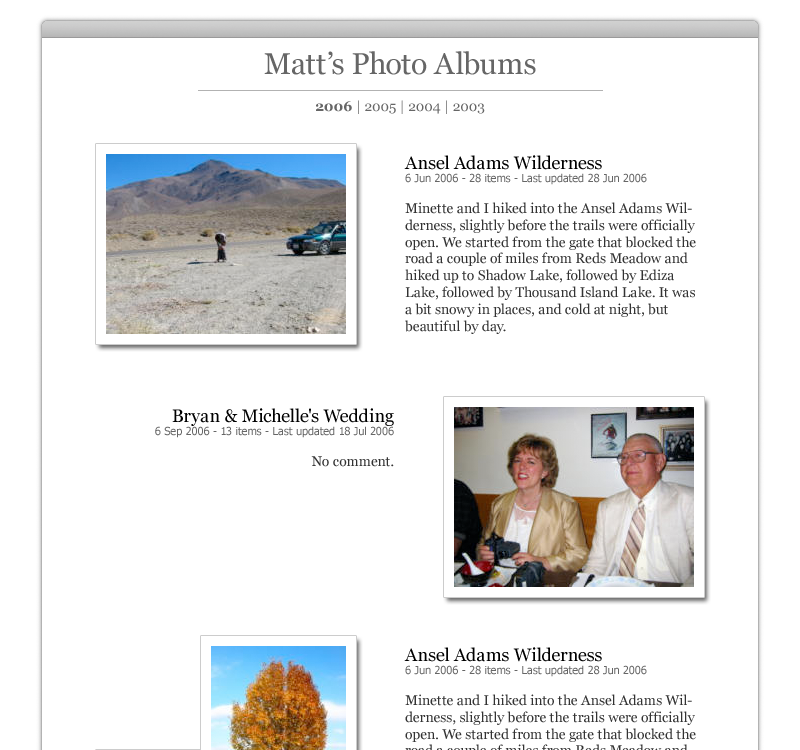
<style>
.page{position:relative;width:800px;height:750px;background:#ffffff}
.page>*{position:absolute;margin:0}
.t1{font:30px "Georgia";color:#666666}
.t2{font:14px "Georgia";color:#666666}
.t3{font:14px "Georgia-Bold";color:#666666}
.t4{font:14px "Georgia";color:#333333}
.t5{font:18px "Georgia";color:#000000}
.t6{font:11px "Tahoma";color:#666666}
</style>
<div class="page">
<p class="t1" style="left:264px;top:51px;width:272px;height:24px">Matt’s Photo Albums</p>
<p class="t2" style="left:316px;top:100px;width:169px;height:14px"><span class="t3">2006 </span>| 2005 | 2004 | 2003</p>
<p class="t4" style="left:404px;top:155px;width:292px;height:179px"><span class="t5">Ansel Adams Wilderness<br></span><span class="t6">6 Jun 2006 - 28 items - Last updated 28 Jun 2006<br><br></span>Minette and I hiked into the Ansel Adams Wilderness, slightly before the trails were officially open. We started from the gate that blocked the road a couple of miles from Reds Meadow and hiked up to Shadow Lake, followed by Ediza Lake, followed by Thousand Island Lake. It was a bit snowy in places, and cold at night, but beautiful by day.</p>
<p class="t6" style="left:155px;top:408px;width:239px;height:59px;text-align:right"><span class="t5">Bryan &amp; Michelle's Wedding<br></span>6 Sep 2006 - 13 items - Last updated 18 Jul 2006<br><br><span class="t4">No comment.</span></p>
</div>
